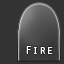
<style>
.page{position:relative;width:64px;height:64px;background:#333333}
.page>*{position:absolute;margin:0}
.t1{font:12px "OratorStd";color:#ffffff}
</style>
<div class="page">
<p class="t1" style="left:26px;top:46px;width:27px;height:8px">Fire</p>
</div>
